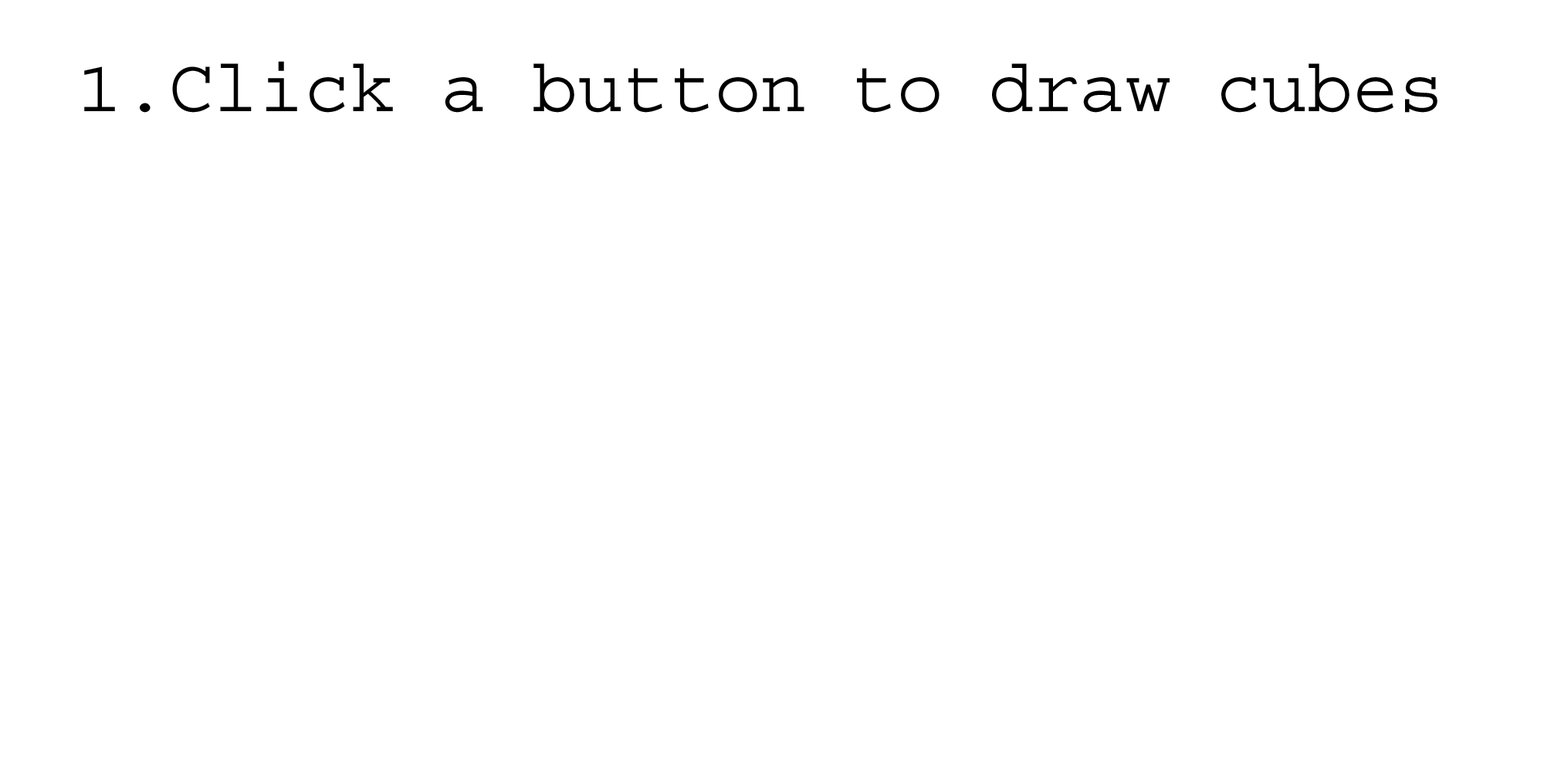
<style>
.page{position:relative;width:1544px;height:772px;background:#ffffff}
.page>*{position:absolute;margin:0}
.t1{font:76px "Courier";color:#000000}
</style>
<div class="page">
<p class="t1" style="left:84px;top:61px;width:1354px;height:52px">1.Click a button to draw cubes</p>
</div>
